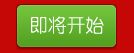
<style>
.page{position:relative;width:134px;height:53px;background:#c50806}
.page>*{position:absolute;margin:0}
.t1{font:18.5px "YouYuan";color:#ffffff}
</style>
<div class="page">
<p class="t1" style="left:31px;top:16px;width:73px;height:18px">即将开始</p>
</div>
